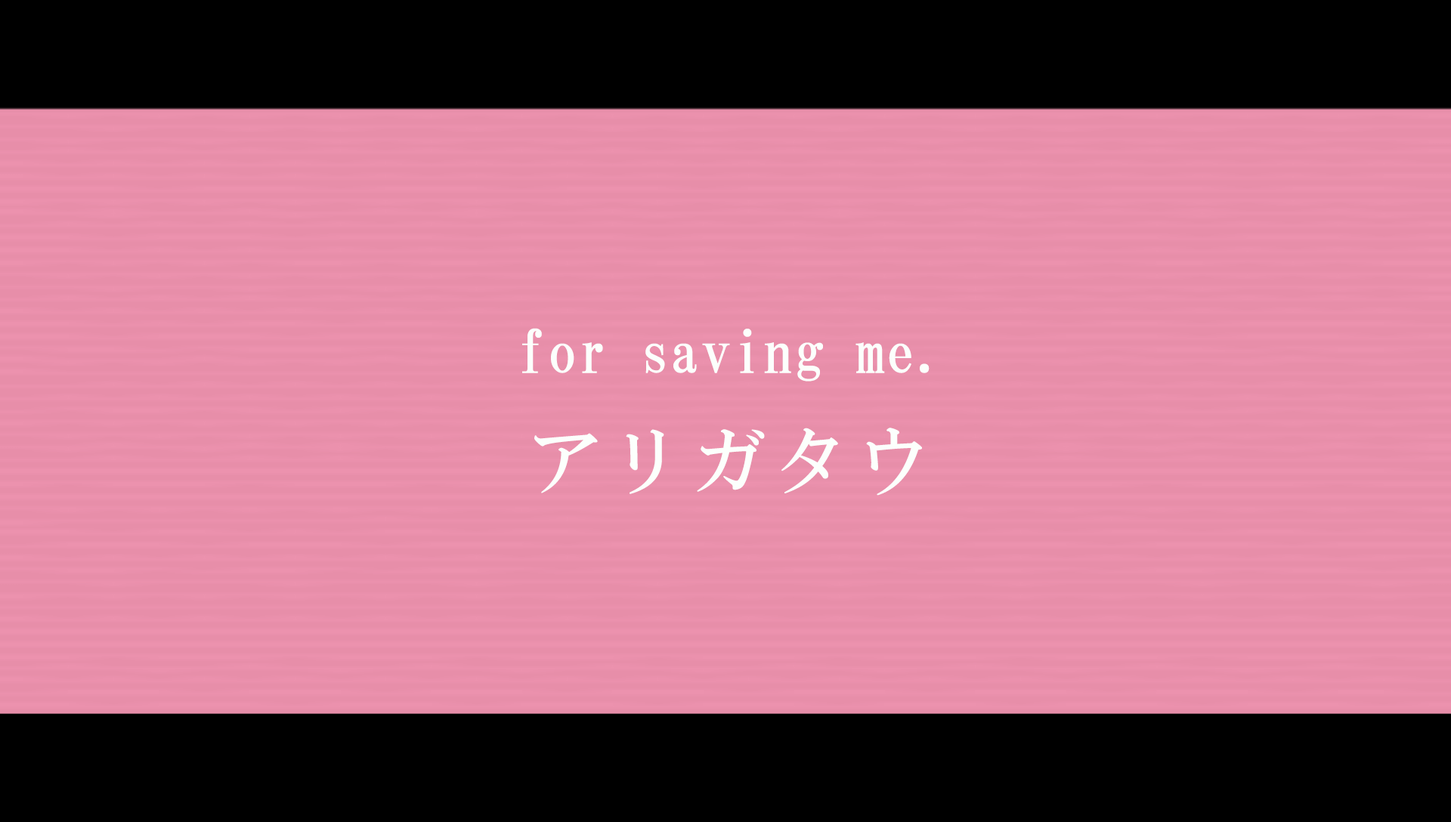
<style>
.page{position:relative;width:1451px;height:822px;background:#e78ea9}
.page>*{position:absolute;margin:0}
.t1{font:60.4px "HGMinchoB";letter-spacing:0.01em;color:#fcfffc}
.t2{font:74px "HGMinchoB";letter-spacing:0.11em;color:#fcfffc}
</style>
<div class="page">
<p class="t1" style="left:522px;top:328px;width:407px;height:54px">for saving me.</p>
<p class="t2" style="left:534px;top:428px;width:388px;height:68px">アリガタウ</p>
</div>
